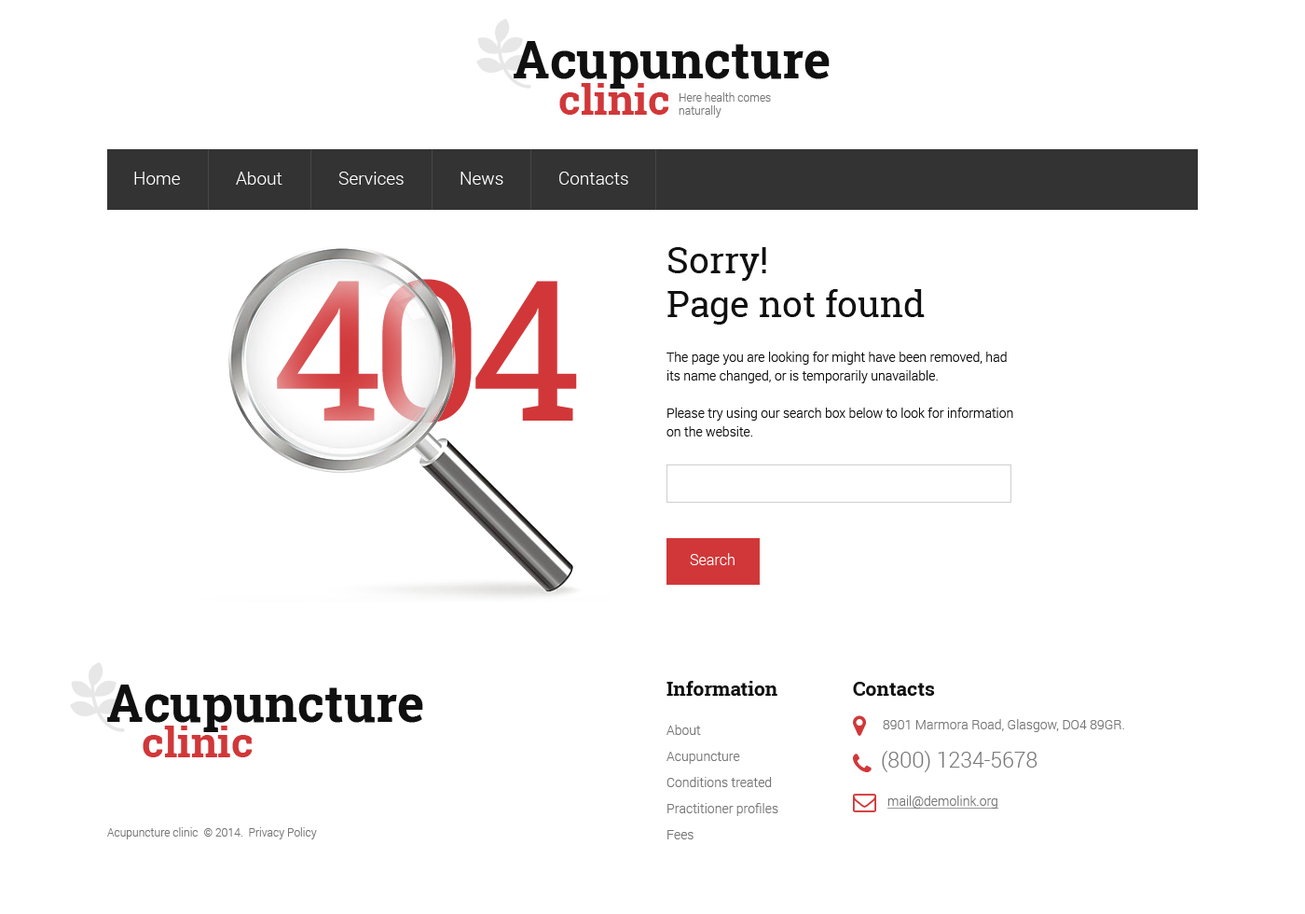
<style>
.page{position:relative;width:1305px;height:914px;background:#ffffff}
.page>*{position:absolute;margin:0}
.t1{font:51.3px "RobotoSlab-Bold";color:#101010}
.t2{font:42px "RobotoSlab-Bold";color:#d13739}
.t3{font:11.2px/13.1px "Roboto-Light";color:#777777}
.t4{font:17.7px "Roboto-Light";color:#ffffff}
.t5{font:36.4px/43.8px "RobotoSlab-Regular";color:#101010}
.t6{font:195.8px "RobotoSlab-Regular";letter-spacing:-0.04em;color:#d13739}
.t7{font:13.1px/18.6px "Roboto-Light";color:#101010}
.t8{font:14.9px "Roboto-Light";color:#ffffff}
.t9{font:19.6px "RobotoSlab-Bold";color:#101010}
.t10{font:13.1px/26.1px "Roboto-Light";color:#777777}
.t11{font:13.1px "Roboto-Light";color:#777777}
.t12{font:21.4px "Roboto-Light";color:#777777}
.t13{font:13.1px "Roboto-Light";color:#777777;text-decoration:underline}
.t14{font:11.2px "Roboto-Light";color:#777777}
</style>
<div class="page">
<p class="t1" style="left:514px;top:41px;width:316px;height:48px">Acupuncture</p>
<p class="t2" style="left:559px;top:83px;width:110px;height:32px">clinic</p>
<p class="t3" style="left:679px;top:92px;width:92px;height:25px">Here health comes <br>naturally</p>
<p class="t4" style="left:134px;top:172px;width:46px;height:13px">Home</p>
<p class="t4" style="left:236px;top:172px;width:46px;height:13px">About</p>
<p class="t4" style="left:338px;top:172px;width:66px;height:13px">Services</p>
<p class="t4" style="left:461px;top:172px;width:42px;height:13px">News</p>
<p class="t4" style="left:559px;top:172px;width:69px;height:13px">Contacts</p>
<p class="t5" style="left:668px;top:247px;width:257px;height:77px">Sorry!<br>Page not found<br>word for our service</p>
<p class="t6" style="left:277px;top:279px;width:300px;height:144px">404</p>
<p class="t7" style="left:667px;top:351px;width:346px;height:85px">The page you are looking for might have been removed, had <br>its name changed, or is temporarily unavailable.<br><br>Please try using our search box below to look for information <br>on the website.</p>
<p class="t8" style="left:690px;top:553px;width:45px;height:12px">Search</p>
<p class="t1" style="left:107px;top:684px;width:316px;height:48px">Acupuncture</p>
<p class="t9" style="left:667px;top:681px;width:111px;height:14px">Information</p>
<p class="t9" style="left:853px;top:681px;width:82px;height:14px">Contacts</p>
<p class="t2" style="left:143px;top:725px;width:110px;height:32px">clinic</p>
<p class="t10" style="left:667px;top:724px;width:111px;height:115px">About<br>Acupuncture<br>Conditions treated<br>Practitioner profiles<br>Fees</p>
<p class="t11" style="left:883px;top:719px;width:241px;height:13px">8901 Marmora Road, Glasgow, DO4 89GR.</p>
<p class="t12" style="left:882px;top:750px;width:156px;height:22px">(800) 1234-5678</p>
<p class="t13" style="left:888px;top:795px;width:110px;height:13px">mail@demolink.org</p>
<p class="t14" style="left:107px;top:827px;width:210px;height:12px">Acupuncture clinic  © 2014.  Privacy Policy</p>
</div>
